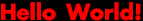
<style>
.page{position:relative;width:143px;height:21px;background:#000000}
.page>*{position:absolute;margin:0}
.t1{font:21px "FuturaBold";color:#ff0000}
</style>
<div class="page">
<p class="t1" style="left:1px;top:2px;width:140px;height:19px">Hello World!</p>
</div>
